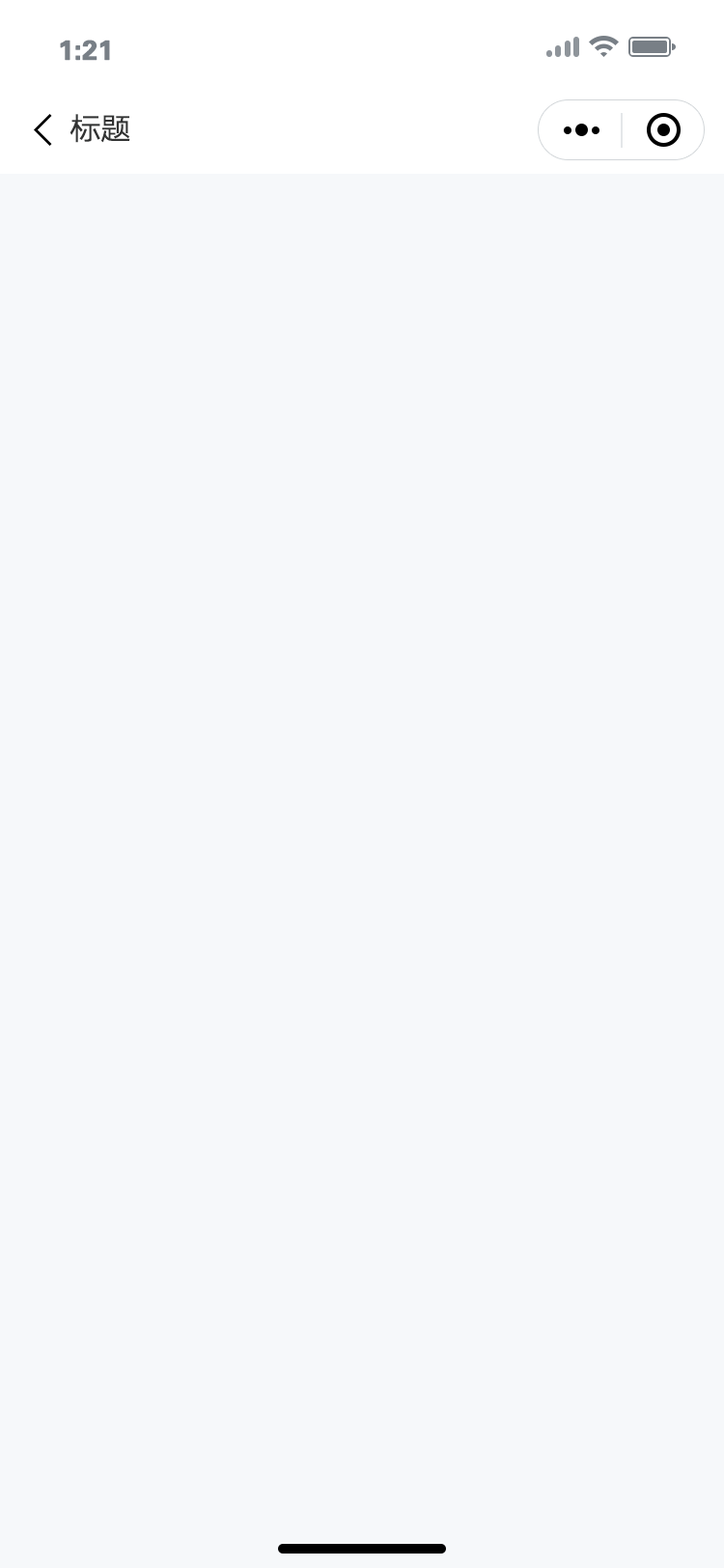
<style>
.page{position:relative;width:724px;height:1568px;background:#f6f8fa}
.page>*{position:absolute;margin:0}
.t1{font:27px "FZDHTJW--GB1-0";color:#787f86;font-weight:bold}
.t2{font:30.9px "ETrump-QiHei";color:#323333}
</style>
<div class="page">
<p class="t1" style="left:60px;top:40px;width:50px;height:21px">1:21</p>
<p class="t2" style="left:70px;top:114px;width:60px;height:29px">标题</p>
</div>
